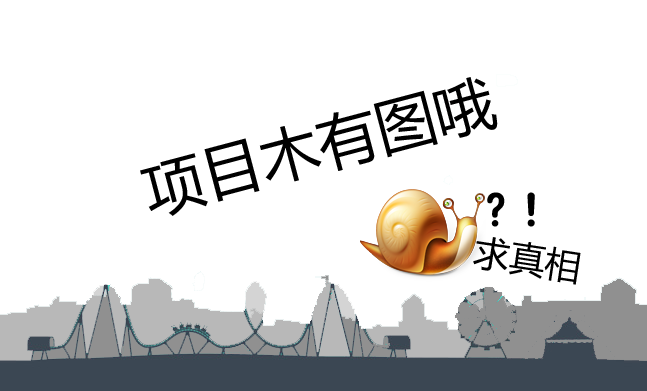
<style>
.page{position:relative;width:647px;height:391px;background:#ffffff}
.page>*{position:absolute;margin:0}
.t1{font:60px "MicrosoftYaHei";color:#000000}
.t2{font:36px "STHupo";color:#000000}
.t3{font:36px "MicrosoftYaHei";color:#000000}
</style>
<div class="page">
<p class="t1" style="left:140px;top:77px;width:358px;height:139px;rotate:-15deg">项目木有图哦</p>
<p class="t2" style="left:487px;top:192px;width:48px;height:35px">？！</p>
<p class="t3" style="left:473px;top:237px;width:108px;height:48px;rotate:9deg">求真相</p>
</div>
